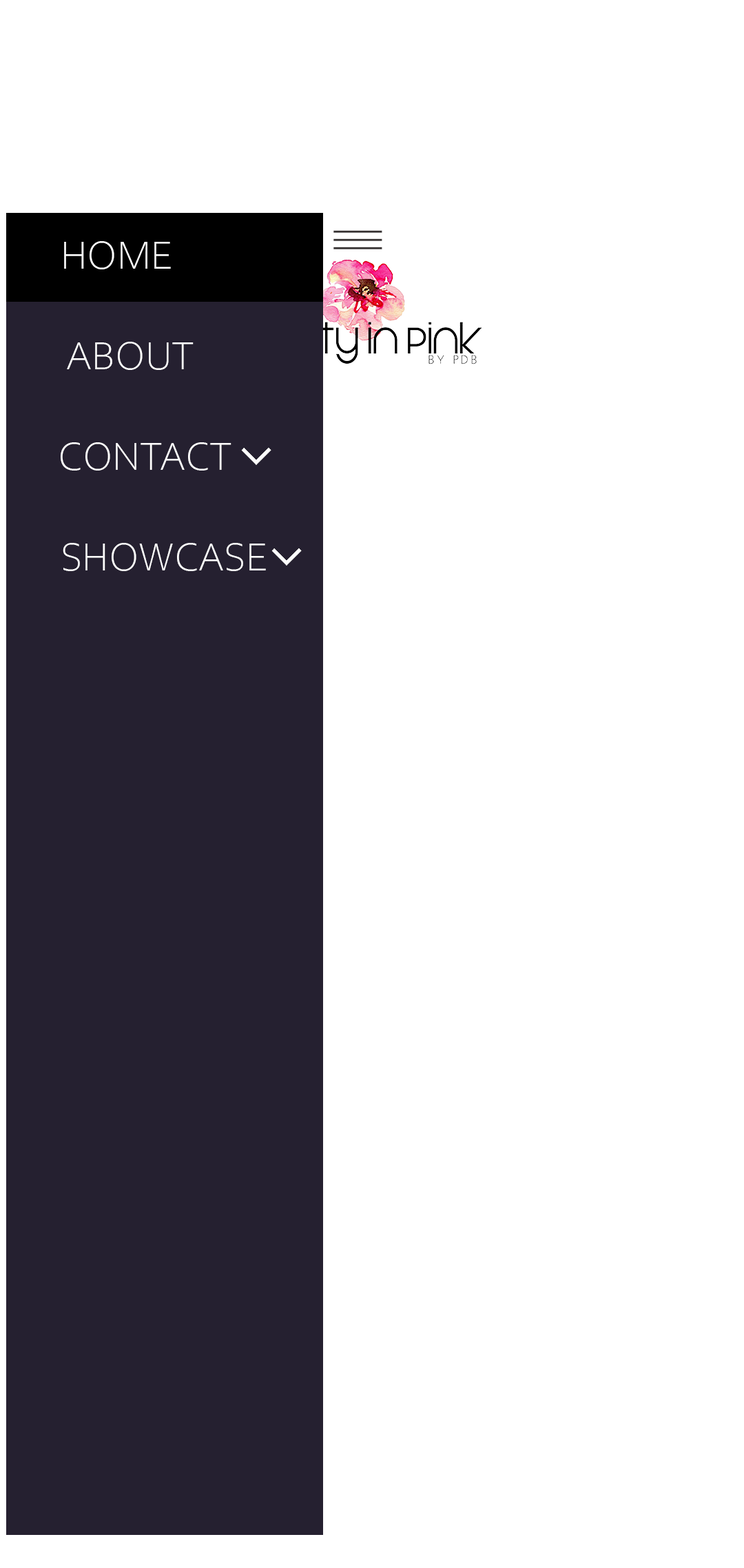
<style>
.page{position:relative;width:744px;height:1568px;background:#ffffff}
.page>*{position:absolute;margin:0}
.t1{font:49.6px "CorbelLight";color:#363232}
.t2{font:41.3px "CorbelLight";color:#ffffff}
.t3{font:41.3px "CorbelLight";color:#fffefe}
.t4{font:41.3px "CorbelLight";color:#fefefe}
</style>
<div class="page">
<p class="t1" style="left:333px;top:230px;width:49px;height:3px">__</p>
<p class="t2" style="left:64px;top:241px;width:107px;height:28px">HOME</p>
<p class="t1" style="left:333px;top:238px;width:49px;height:3px">__</p>
<p class="t1" style="left:333px;top:247px;width:49px;height:2px">__</p>
<p class="t2" style="left:67px;top:342px;width:127px;height:28px">ABOUT</p>
<p class="t3" style="left:61px;top:442px;width:170px;height:29px">CONTACT</p>
<p class="t4" style="left:63px;top:543px;width:203px;height:28px">SHOWCASE</p>
</div>
